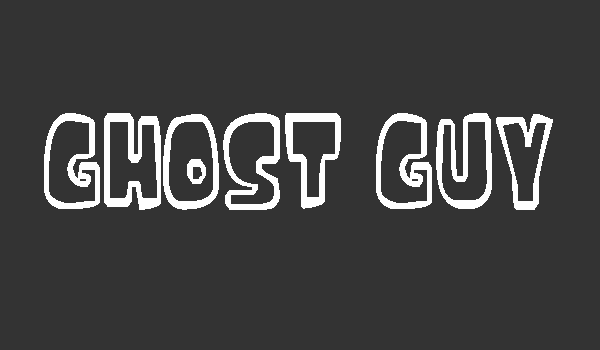
<style>
.page{position:relative;width:600px;height:350px;background:#333333}
.page>*{position:absolute;margin:0}
.t1{font:199.8px "iceagefont";color:#ffffff;scale:0.62 1}
</style>
<div class="page">
<p class="t1" style="left:44px;top:113px;width:509px;height:97px">GHOST GUY</p>
</div>
